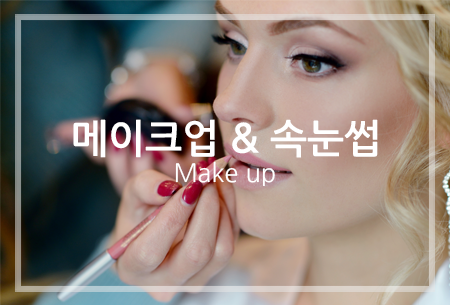
<style>
.page{position:relative;width:450px;height:305px}
.page>*{position:absolute;margin:0}
.t1{font:39.5px "NanumGothicBold";color:#ffffff}
.t2{font:25.3px "NanumGothic";color:#ffffff}
</style>
<div class="page">
<p class="t1" style="left:73px;top:119px;width:305px;height:39px">메이크업 &amp; 속눈썹</p>
<p class="t2" style="left:175px;top:161px;width:100px;height:25px">Make up</p>
</div>
